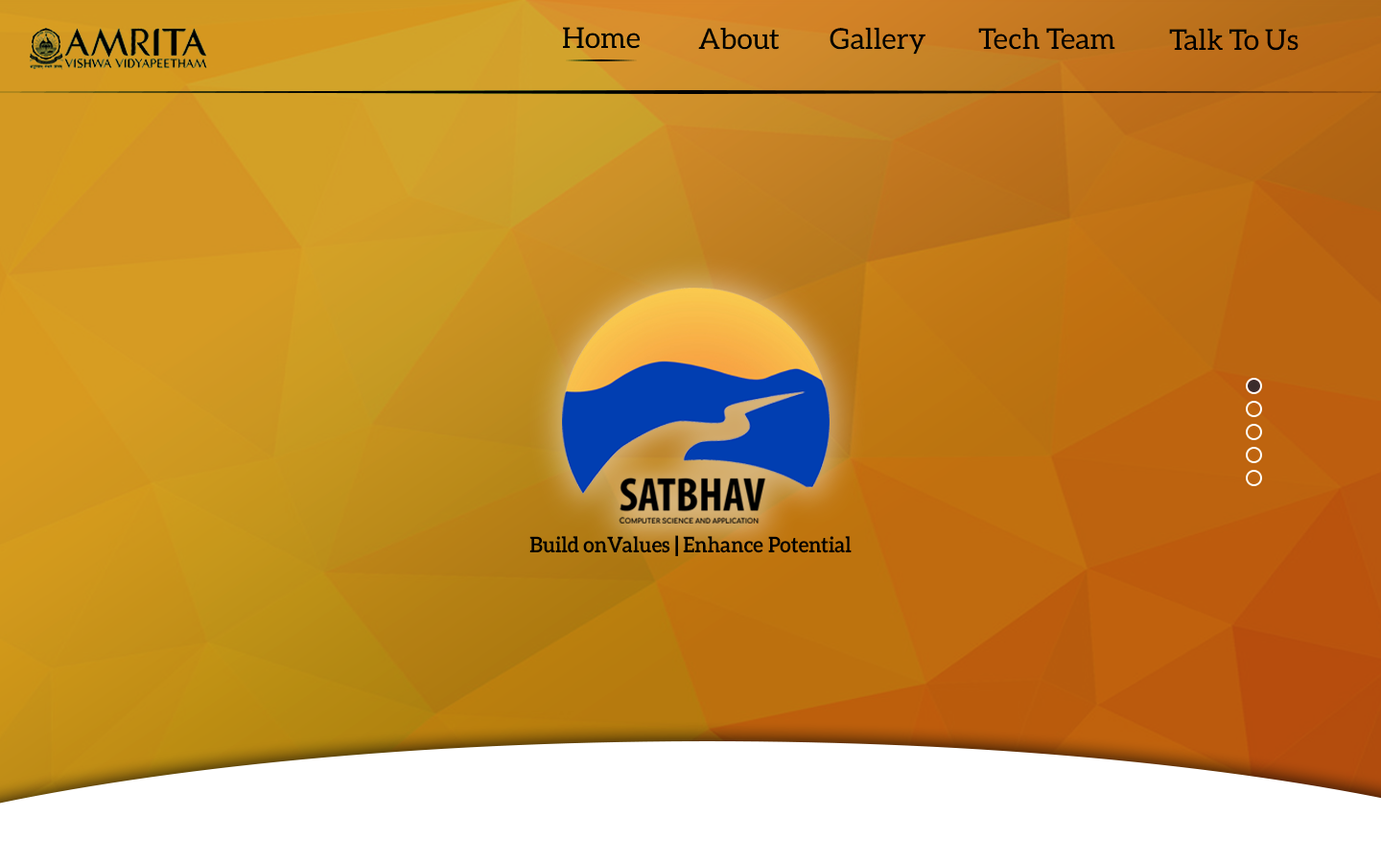
<style>
.page{position:relative;width:1381px;height:863px}
.page>*{position:absolute;margin:0}
.t1{font:28.8px "Aleo-Regular";color:#000000}
.t2{font:21.7px "Aleo-Bold";color:#000000;scale:0.93 1}
.t3{font:21.7px "Aleo-Bold";color:#000000;font-weight:bold;scale:0.93 1}
</style>
<div class="page">
<p class="t1" style="left:563px;top:27px;width:77px;height:22px">Home</p>
<p class="t1" style="left:698px;top:28px;width:82px;height:22px">About</p>
<p class="t1" style="left:830px;top:27px;width:96px;height:28px">Gallery</p>
<p class="t1" style="left:978px;top:28px;width:138px;height:22px">Tech Team</p>
<p class="t1" style="left:1169px;top:28px;width:130px;height:23px">Talk To Us</p>
<p class="t2" style="left:529px;top:535px;width:323px;height:21px">Build onValues <span class="t3">|</span> Enhance Potential</p>
</div>
